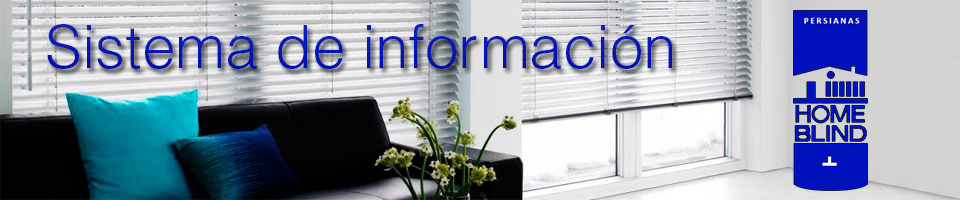
<style>
.page{position:relative;width:960px;height:200px}
.page>*{position:absolute;margin:0}
.t1{font:60px "HelveticaLTStd-Light";color:#0011bb}
</style>
<div class="page">
<p class="t1" style="left:47px;top:24px;width:625px;height:45px">Sistema de información</p>
</div>
